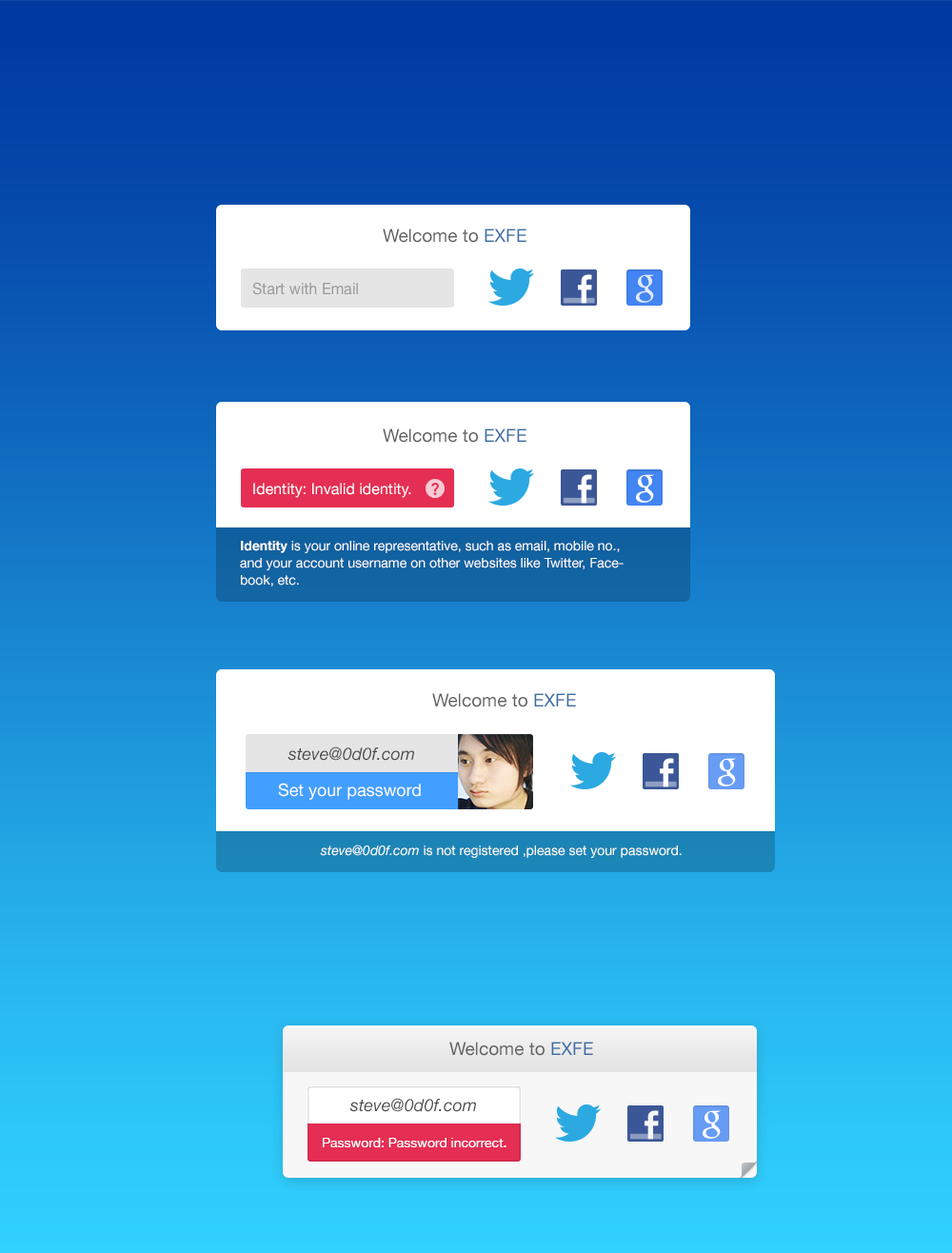
<style>
.page{position:relative;width:952px;height:1253px}
.page>*{position:absolute;margin:0}
.t1{font:18.1px "HelveticaNeue";color:#626262}
.t2{font:18.1px "HelveticaNeue";color:#3a6ea5}
.t3{font:15.2px "HelveticaNeue";color:#9b9b9b}
.t4{font:36.2px "Catull-Regular";color:#e1e9fc}
.t5{font:15.2px "HelveticaNeue";color:#ffffff}
.t6{font:17.1px "AvenirLTStd-Heavy";color:#e52e53}
.t7{font:36.2px "Catull-Regular";color:#fefefe}
.t8{font:13.3px/17.1px "HelveticaNeue";color:#ffffff}
.t9{font:13.3px/17.1px "HelveticaNeue-Bold";color:#ffffff}
.t10{font:17.1px "HelveticaNeue-Italic";color:#4e4e4e}
.t11{font:17.1px "HelveticaNeue";color:#ffffff}
.t12{font:13.3px "HelveticaNeue";color:#ffffff}
.t13{font:13.3px "HelveticaNeue-Italic";color:#ffffff}
</style>
<div class="page">
<p class="t1" style="left:383px;top:228px;width:143px;height:15px">Welcome to <span class="t2">EXFE</span></p>
<p class="t3" style="left:252px;top:282px;width:106px;height:13px">Start with Email</p>
<p class="t4" style="left:636px;top:274px;width:18px;height:29px">g</p>
<p class="t1" style="left:383px;top:428px;width:143px;height:15px">Welcome to <span class="t2">EXFE</span></p>
<p class="t5" style="left:253px;top:483px;width:158px;height:15px">Identity: Invalid identity.</p>
<p class="t6" style="left:431px;top:483px;width:8px;height:12px">?</p>
<p class="t7" style="left:636px;top:474px;width:18px;height:29px">g</p>
<p class="t8" style="left:240px;top:541px;width:383px;height:45px"><span class="t9">Identity </span>is your online representative, such as email, mobile no., and your account username on other websites like Twitter, Facebook, etc.</p>
<p class="t1" style="left:432px;top:693px;width:144px;height:14px">Welcome to <span class="t2">EXFE</span></p>
<p class="t10" style="left:287px;top:746px;width:127px;height:15px">steve@0d0f.com</p>
<p class="t7" style="left:718px;top:758px;width:18px;height:28px">g</p>
<p class="t11" style="left:278px;top:782px;width:143px;height:18px">Set your password</p>
<p class="t12" style="left:320px;top:844px;width:362px;height:14px"><span class="t13">steve@0d0f.com </span>is not registered ,please set your password.</p>
<p class="t1" style="left:449px;top:1041px;width:144px;height:15px">Welcome to <span class="t2">EXFE</span></p>
<p class="t10" style="left:349px;top:1098px;width:127px;height:14px">steve@0d0f.com</p>
<p class="t7" style="left:702px;top:1110px;width:19px;height:28px">g</p>
<p class="t12" style="left:323px;top:1138px;width:183px;height:9px">Password: Password incorrect.</p>
</div>
